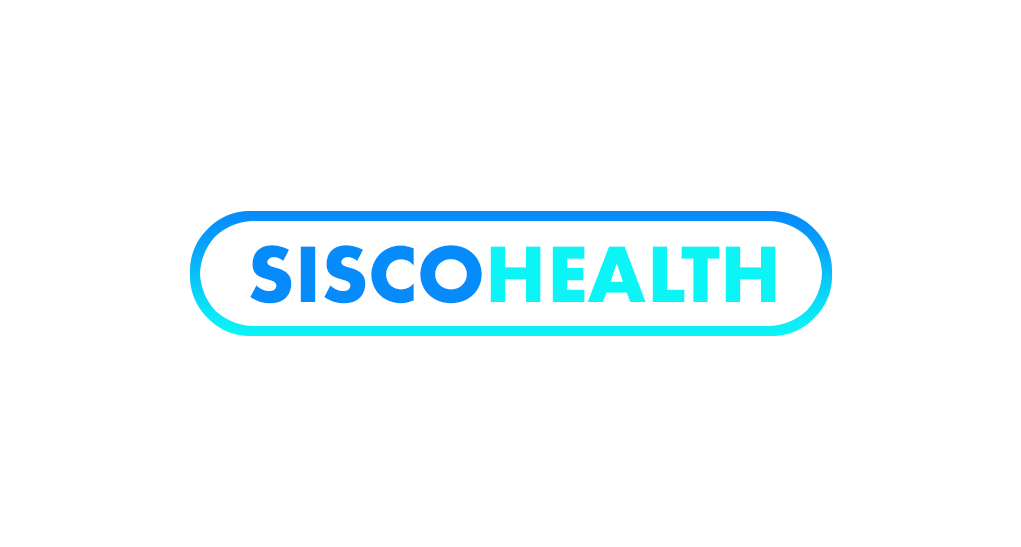
<style>
.page{position:relative;width:1021px;height:547px;background:#ffffff}
.page>*{position:absolute;margin:0}
.t1{font:83.3px "FuturaPT-Bold";color:#0bf5f6}
.t2{font:83.3px "FuturaPT-Bold";color:#068bfb}
</style>
<div class="page">
<p class="t1" style="left:250px;top:245px;width:526px;height:59px"><span class="t2">SISCO</span>HEALTH</p>
</div>
